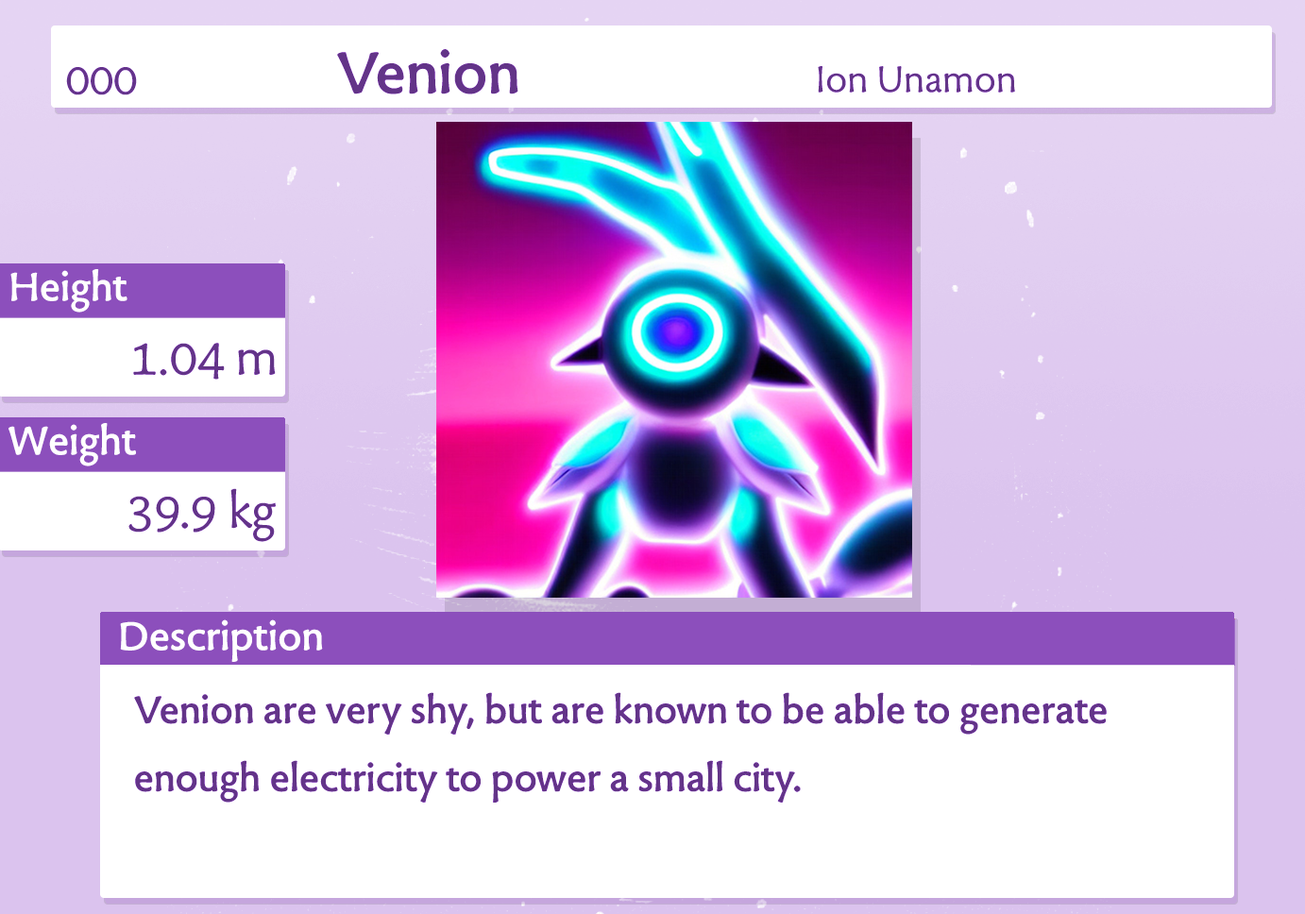
<style>
.page{position:relative;width:1305px;height:914px;background:#ffffff}
.page>*{position:absolute;margin:0}
.t1{font:68px "TuffW01-Bold";color:#633488}
.t2{font:49.5px "TuffW01-Normal";color:#64358a}
.t3{font:42.8px "TuffW01-Normal";color:#633488}
.t4{font:46.3px "TuffW01-Bold";color:#ffffff}
.t5{font:56.7px "TuffW01-Normal";color:#633488}
.t6{font:44.6px/68px "TuffW01-Bold";color:#633488}
</style>
<div class="page">
<p class="t1" style="left:337px;top:49px;width:181px;height:45px">Venion</p>
<p class="t2" style="left:66px;top:67px;width:71px;height:28px">000</p>
<p class="t3" style="left:818px;top:66px;width:197px;height:27px">Ion Unamon</p>
<p class="t4" style="left:10px;top:269px;width:117px;height:44px">Height</p>
<p class="t5" style="left:133px;top:343px;width:143px;height:37px">1.04 m</p>
<p class="t4" style="left:8px;top:423px;width:128px;height:43px">Weight</p>
<p class="t5" style="left:128px;top:488px;width:148px;height:54px">39.9 kg</p>
<p class="t4" style="left:120px;top:619px;width:203px;height:43px">Description</p>
<p class="t6" style="left:134px;top:692px;width:973px;height:110px">Venion are very shy, but are known to be able to generate<br>enough electricity to power a small city.</p>
</div>
